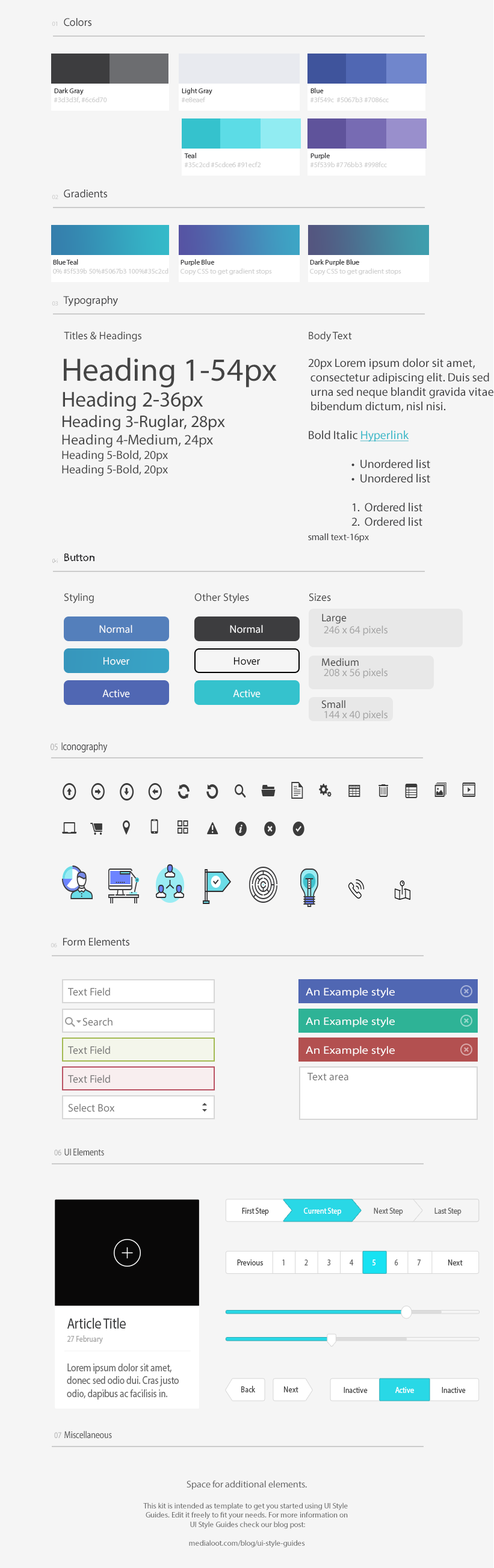
<style>
.page{position:relative;width:494px;height:1568px;background:#f5f5f5}
.page>*{position:absolute;margin:0}
.t1{font:6.3px "MyriadPro-Regular";color:#c9c9c9}
.t2{font:11.1px "MyriadPro-Regular";color:#3d3d3f}
.t3{font:7.1px "MyriadPro-Regular";color:#d2d2d2}
.t4{font:7.1px "MyriadPro-Regular";color:#3d3d3f}
.t5{font:10.8px "MyriadPro-Regular";color:#444444}
.t6{font:12px/14.4px "MyriadPro-Regular";color:#3d3d3f}
.t7{font:12px/14.4px "MyriadPro-Regular";color:#35b8c8;text-decoration:underline}
.t8{font:9.6px/14.4px "MyriadPro-Regular";color:#3d3d3f}
.t9{font:12px "MyriadPro-Regular";color:#444444}
.t10{font:32.5px "MyriadPro-Regular";color:#444444}
.t11{font:21.7px "MyriadPro-Regular";color:#444444}
.t12{font:16.8px "MyriadPro-Regular";color:#444444}
.t13{font:14.4px "MyriadPro-Regular";color:#444444}
.t14{font:10.8px "MyriadPro-Regular";color:#fefefe}
.t15{font:10.8px "MyriadPro-Regular";color:#a4a4a4}
.t16{font:10.8px "MyriadPro-Regular";color:#000000}
.t17{font:11.1px "MyriadPro-Regular";color:#3d3d3f;scale:0.81 1}
.t18{font:9.6px "MyriadPro-Regular";color:#aaaaaa;scale:0.81 1}
.t19{font:10.8px "MyriadPro-Regular";color:#747474}
.t20{font:10.8px "MyriadPro-Regular";color:#ffffff;scale:1.17 1}
.t21{font:10.8px "FontAwesome";color:#747474}
.t22{font:10px "MyriadPro-Regular";color:#444444;scale:0.83 1}
.t23{font:8.7px "MyriadPro-Regular";color:#aaaaaa;scale:0.83 1}
.t24{font:8.7px "MyriadPro-Regular";color:#444444;scale:0.83 1}
.t25{font:8.7px "MyriadPro-Regular";color:#ffffff;scale:0.83 1}
.t26{font:8.7px "MyriadPro-Regular";color:#666666;scale:0.83 1}
.t27{font:15.2px/11.9px "MyriadPro-Regular";color:#393a3c;scale:0.83 1}
.t28{font:8.7px/13px "MyriadPro-Regular";color:#aaaaaa;scale:0.83 1}
.t29{font:10.8px/13px "MyriadPro-Regular";color:#666666;scale:0.83 1}
.t30{font:8.7px "MyriadPro-Regular";color:#454545;scale:0.83 1}
.t31{font:7.8px "MyriadPro-Regular";color:#666666}
.t32{font:9.6px "MyriadPro-Regular";color:#666666}
</style>
<div class="page">
<p class="t1" style="left:52px;top:22px;width:5px;height:4px">01</p>
<p class="t2" style="left:64px;top:18px;width:27px;height:8px">Colors</p>
<p class="t3" style="left:54px;top:88px;width:53px;height:15px"><span class="t4">Dark Gray<br></span>#3d3d3f, #6c6d70</p>
<p class="t4" style="left:182px;top:88px;width:30px;height:14px">Light Gray<br><span class="t3">#e8eaef</span></p>
<p class="t3" style="left:310px;top:88px;width:79px;height:14px"><span class="t4">Blue<br></span>#3f549c  #5067b3 #7086cc</p>
<p class="t3" style="left:184px;top:153px;width:77px;height:14px"><span class="t4">Teal<br></span>#35c2cd #5cdce6 #91ecf2</p>
<p class="t3" style="left:310px;top:153px;width:77px;height:14px"><span class="t4">Purple<br></span>#5f539b #776bb3 #998fcc</p>
<p class="t1" style="left:52px;top:195px;width:6px;height:4px">02</p>
<p class="t2" style="left:64px;top:189px;width:43px;height:9px">Gradients</p>
<p class="t3" style="left:53px;top:259px;width:115px;height:15px"><span class="t4">Blue Teal<br></span>0% #5f539b 50%#5067b3 100%#35c2cd</p>
<p class="t3" style="left:180px;top:259px;width:92px;height:16px"><span class="t4">Purple Blue<br></span>Copy CSS to get gradient stops</p>
<p class="t3" style="left:310px;top:259px;width:91px;height:16px"><span class="t4">Dark Purple Blue<br></span>Copy CSS to get gradient stops</p>
<p class="t1" style="left:52px;top:301px;width:6px;height:5px">03</p>
<p class="t2" style="left:63px;top:296px;width:55px;height:10px">Typography</p>
<p class="t5" style="left:64px;top:331px;width:77px;height:11px">Titles &amp; Headings</p>
<p class="t6" style="left:308px;top:331px;width:185px;height:212px"><span class="t5">Body Text<br><br></span>20px Lorem ipsum dolor sit amet,<br> consectetur adipiscing elit. Duis sed<br> urna sed neque blandit gravida vitae<br> bibendum dictum, nisl nisi.<br><br>Bold Italic <span class="t7">Hyperlink<br><br> </span> •  Unordered list<br>  •  Unordered list<br>  <br>  1.  Ordered list<br>  2.  Ordered list<br><span class="t8">small text-16px</span></p>
<p class="t9" style="left:62px;top:357px;width:215px;height:119px"><span class="t10">Heading 1-54px<br></span><span class="t11">Heading 2-36px<br></span><span class="t12">Heading 3-Ruglar, 28px<br></span><span class="t13">Heading 4-Medium, 24px<br></span>Heading 5-Bold, 20px<br>Heading 5-Bold, 20px</p>
<p class="t2" style="left:64px;top:553px;width:30px;height:8px">Button</p>
<p class="t1" style="left:52px;top:559px;width:6px;height:4px">04</p>
<p class="t5" style="left:64px;top:593px;width:30px;height:10px">Styling</p>
<p class="t5" style="left:194px;top:593px;width:55px;height:10px">Other Styles</p>
<p class="t5" style="left:309px;top:593px;width:22px;height:8px">Sizes</p>
<p class="t5" style="left:322px;top:613px;width:24px;height:11px">Large</p>
<p class="t14" style="left:99px;top:625px;width:33px;height:8px">Normal</p>
<p class="t14" style="left:230px;top:625px;width:33px;height:8px">Normal</p>
<p class="t15" style="left:324px;top:626px;width:63px;height:10px">246 x 64 pixels</p>
<p class="t14" style="left:103px;top:657px;width:26px;height:8px">Hover</p>
<p class="t16" style="left:234px;top:657px;width:26px;height:8px">Hover</p>
<p class="t5" style="left:322px;top:658px;width:36px;height:8px">Medium</p>
<p class="t15" style="left:324px;top:668px;width:63px;height:10px">208 x 56 pixels</p>
<p class="t14" style="left:102px;top:689px;width:28px;height:9px">Active</p>
<p class="t14" style="left:233px;top:689px;width:27px;height:9px">Active</p>
<p class="t5" style="left:321px;top:700px;width:24px;height:9px">Small</p>
<p class="t15" style="left:324px;top:710px;width:63px;height:11px">144 x 40 pixels</p>
<p class="t17" style="left:51px;top:742px;width:57px;height:10px"><span class="t18">05 </span>Iconography</p>
<p class="t2" style="left:63px;top:938px;width:66px;height:8px">Form Elements</p>
<p class="t1" style="left:51px;top:943px;width:6px;height:4px">06</p>
<p class="t19" style="left:68px;top:988px;width:42px;height:8px">Text Field</p>
<p class="t20" style="left:306px;top:988px;width:89px;height:10px">An Example style</p>
<p class="t19" style="left:82px;top:1018px;width:30px;height:8px"><span class="t21">   </span> Search</p>
<p class="t20" style="left:306px;top:1017px;width:89px;height:10px">An Example style</p>
<p class="t19" style="left:68px;top:1046px;width:42px;height:8px">Text Field</p>
<p class="t20" style="left:306px;top:1046px;width:89px;height:10px">An Example style</p>
<p class="t19" style="left:307px;top:1072px;width:41px;height:9px">Text area</p>
<p class="t19" style="left:68px;top:1075px;width:42px;height:8px">Text Field</p>
<p class="t19" style="left:68px;top:1104px;width:47px;height:8px">Select Box</p>
<p class="t22" style="left:54px;top:1148px;width:50px;height:8px"><span class="t23">06 </span>UI Elements</p>
<p class="t24" style="left:242px;top:1208px;width:27px;height:8px">First Step</p>
<p class="t25" style="left:304px;top:1208px;width:37px;height:8px">Current Step</p>
<p class="t26" style="left:374px;top:1208px;width:29px;height:8px">Next Step</p>
<p class="t26" style="left:434px;top:1208px;width:27px;height:8px">Last Step</p>
<p class="t24" style="left:237px;top:1259px;width:26px;height:6px">Previous</p>
<p class="t26" style="left:282px;top:1259px;width:2px;height:6px">1</p>
<p class="t26" style="left:304px;top:1259px;width:4px;height:6px">2</p>
<p class="t26" style="left:327px;top:1259px;width:3px;height:6px">3</p>
<p class="t26" style="left:349px;top:1259px;width:5px;height:6px">4</p>
<p class="t25" style="left:372px;top:1259px;width:3px;height:6px">5</p>
<p class="t26" style="left:395px;top:1259px;width:3px;height:6px">6</p>
<p class="t26" style="left:417px;top:1259px;width:3px;height:6px">7</p>
<p class="t24" style="left:448px;top:1259px;width:15px;height:6px">Next</p>
<p class="t27" style="left:67px;top:1318px;width:59px;height:26px">Article Title<br><span class="t28">27 February</span></p>
<p class="t29" style="left:67px;top:1364px;width:112px;height:36px">Lorem ipsum dolor sit amet, donec sed odio dui. Cras justo odio, dapibus ac facilisis in. Egestas eget quam.</p>
<p class="t30" style="left:241px;top:1386px;width:14px;height:6px">Back</p>
<p class="t30" style="left:284px;top:1386px;width:14px;height:6px">Next</p>
<p class="t30" style="left:343px;top:1387px;width:24px;height:6px">Inactive</p>
<p class="t25" style="left:395px;top:1387px;width:19px;height:6px">Active</p>
<p class="t30" style="left:441px;top:1387px;width:25px;height:6px">Inactive</p>
<p class="t22" style="left:54px;top:1431px;width:58px;height:8px"><span class="t23">07 </span>Miscellaneous</p>
<p class="t31" style="left:143px;top:1480px;width:205px;height:68px;text-align:center"><span class="t32">Space for additional elements.<br><br></span>This kit is intended as template to get you started using UI Style <br>Guides. Edit it freely to fit your needs. For more information on<br> UI Style Guides check our blog post:<br><br>medialoot.com/blog/ui-style-guides</p>
</div>
